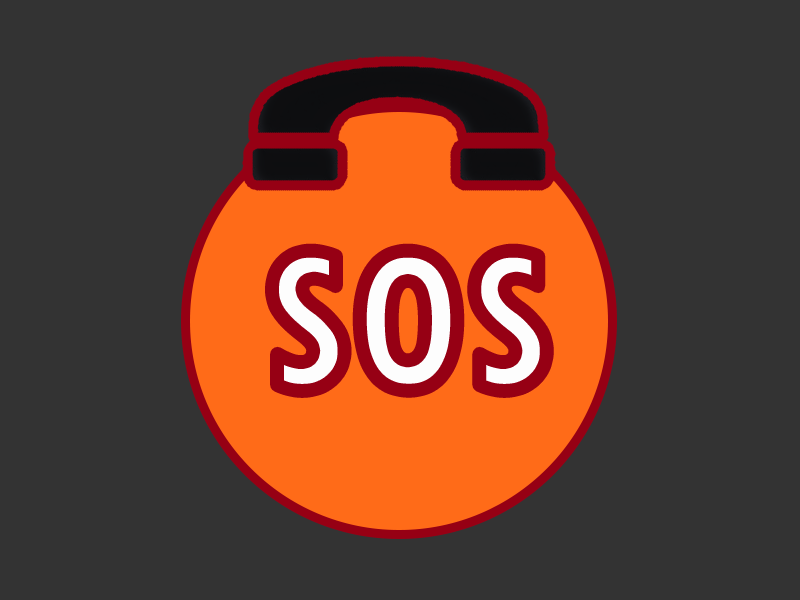
<style>
.page{position:relative;width:800px;height:600px;background:#333333}
.page>*{position:absolute;margin:0}
.t1{font:203.7px "TwCenMT-CondensedExtraBold"}
</style>
<div class="page">
<p class="t1" style="left:272px;top:250px;width:275px;height:141px">SOS</p>
</div>
